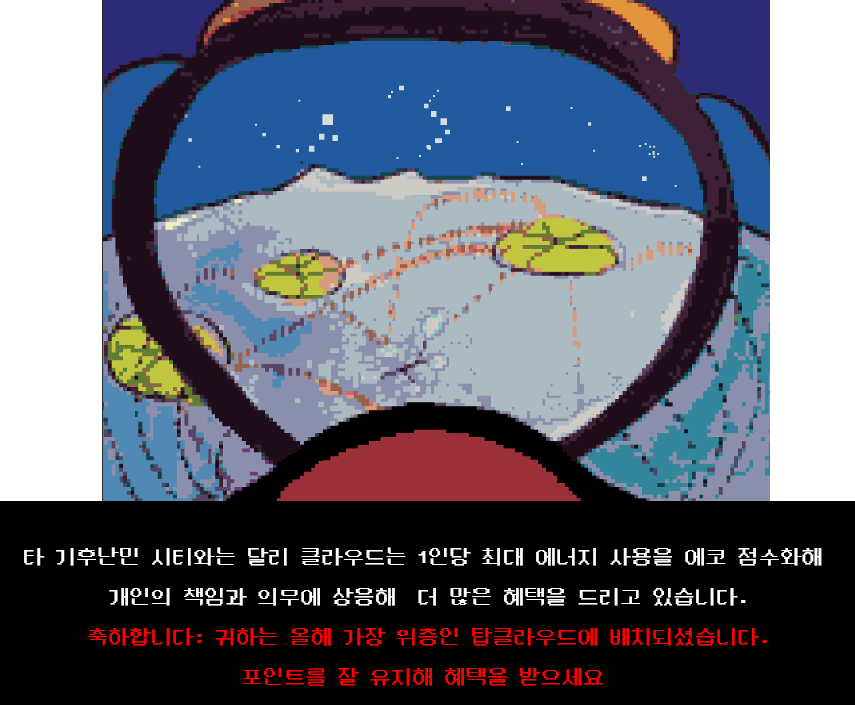
<style>
.page{position:relative;width:855px;height:705px;background:#000000}
.page>*{position:absolute;margin:0}
.t1{font:21.3px/20px "DungGeunMo";color:#ffffff}
.t2{font:21.3px/20px "DungGeunMo";color:#ff0000}
</style>
<div class="page">
<p class="t1" style="left:24px;top:547px;width:798px;height:139px;text-align:center">타 기후난민 시티와는 달리 클라우드는 1인당 최대 에너지 사용을 에코 점수화해 <br><br>개인의 책임과 의무에 상응해  더 많은 혜택을 드리고 있습니다.<br><br><span class="t2">축하합니다: 귀하는 올해 가장 위층인 탑클라우드에 배치되셨습니다.<br><br>포인트를 잘 유지해 혜택을 받으세요</span></p>
</div>
